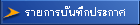
<style>
.page{position:relative;width:140px;height:25px}
.page>*{position:absolute;margin:0}
.t1{font:15.3px "EucrosiaDSE";color:#ffffff;scale:1.12 1}
</style>
<div class="page">
<p class="t1" style="left:25px;top:6px;width:100px;height:10px">ÃÒÂ¡ÒÃºÑ¹·Ö¡»ÃÐ¡ÒÈ</p>
</div>
